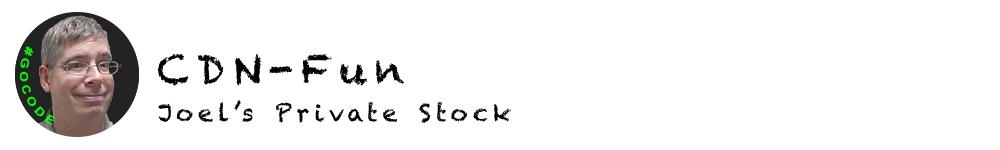
<style>
.page{position:relative;width:1000px;height:150px;background:#ffffff}
.page>*{position:absolute;margin:0}
.t1{font:11.2px "Arial-BoldMT";letter-spacing:0.2em;color:#00ff00}
.t2{font:40px "Chalkduster";letter-spacing:0.2em;color:#000000}
.t3{font:24px "Chalkduster";letter-spacing:0.2em;color:#000000}
</style>
<div class="page">
<p class="t1" style="left:19px;top:46px;width:37px;height:80px;rotate:72deg">#GOCODE</p>
<p class="t2" style="left:158px;top:54px;width:246px;height:32px">CDN-Fun</p>
<p class="t3" style="left:158px;top:100px;width:353px;height:23px">Joel’s Private Stock</p>
</div>
